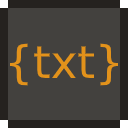
<style>
.page{position:relative;width:128px;height:128px;background:#43413e}
.page>*{position:absolute;margin:0}
.t1{font:45px "DejaVuSans";color:#e2921b}
</style>
<div class="page">
<p class="t1" style="left:10px;top:43px;width:108px;height:43px">{txt}</p>
</div>
